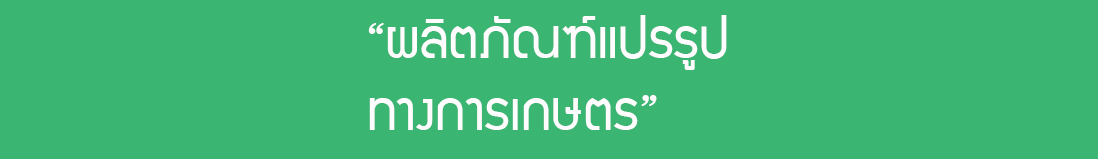
<style>
.page{position:relative;width:1098px;height:159px;background:#3ab572}
.page>*{position:absolute;margin:0}
.t1{font:60px "supermarket";color:#fefcfc}
</style>
<div class="page">
<p class="t1" style="left:368px;top:15px;width:359px;height:115px">“ผลิตภัณฑ์แปรรูป<br>ทางการเกษตร”</p>
</div>
